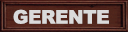
<style>
.page{position:relative;width:128px;height:32px}
.page>*{position:absolute;margin:0}
.t1{font:18.7px "Arial-Black";letter-spacing:-0.025em;color:#dadada}
</style>
<div class="page">
<p class="t1" style="left:13px;top:9px;width:96px;height:15px">GERENTE</p>
</div>
